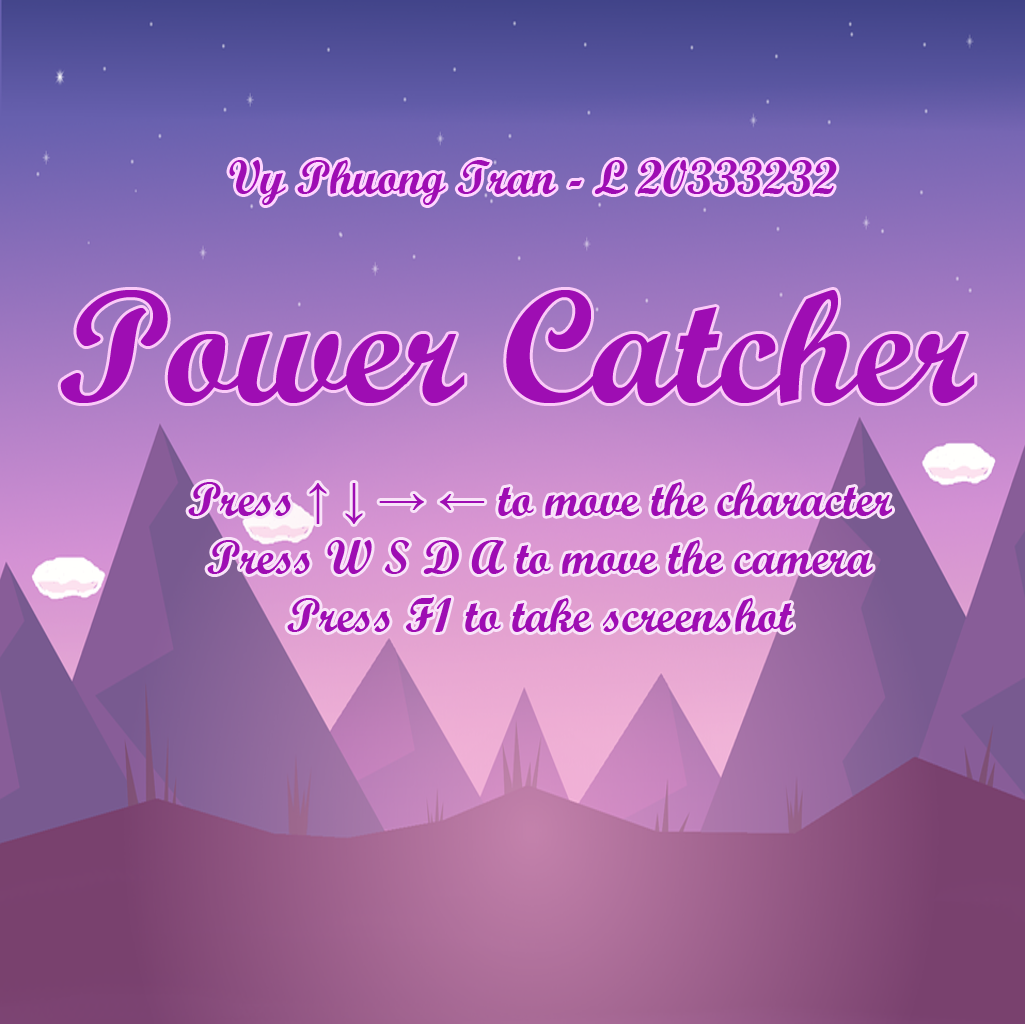
<style>
.page{position:relative;width:1025px;height:1024px}
.page>*{position:absolute;margin:0}
.t1{font:48px "ScriptMTBold";color:#9e0db3}
.t2{font:160px "ScriptMTBold";color:#9e0db3}
.t3{font:48px "TimesNewRomanPSMT";color:#9e0db3}
</style>
<div class="page">
<p class="t1" style="left:229px;top:160px;width:608px;height:45px">Vy Phuong Tran - L 20333232</p>
<p class="t2" style="left:60px;top:290px;width:915px;height:113px">Power Catcher</p>
<p class="t1" style="left:188px;top:482px;width:704px;height:150px;text-align:center">Press <span class="t3">↑ ↓ → ← </span>to move the character<br>Press W S D A to move the camera<br>Press F1 to take screenshot</p>
</div>
